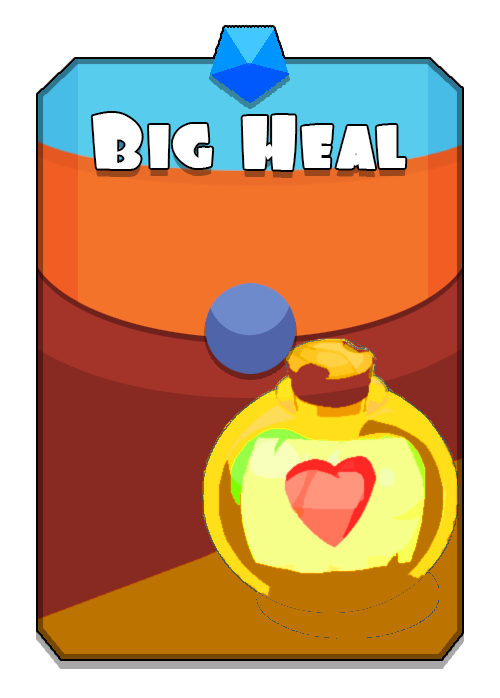
<style>
.page{position:relative;width:500px;height:698px;background:#ffffff}
.page>*{position:absolute;margin:0}
.t1{font:69px "Foo";color:#ffffff}
</style>
<div class="page">
<p class="t1" style="left:92px;top:113px;width:314px;height:57px">Big Heal</p>
</div>
